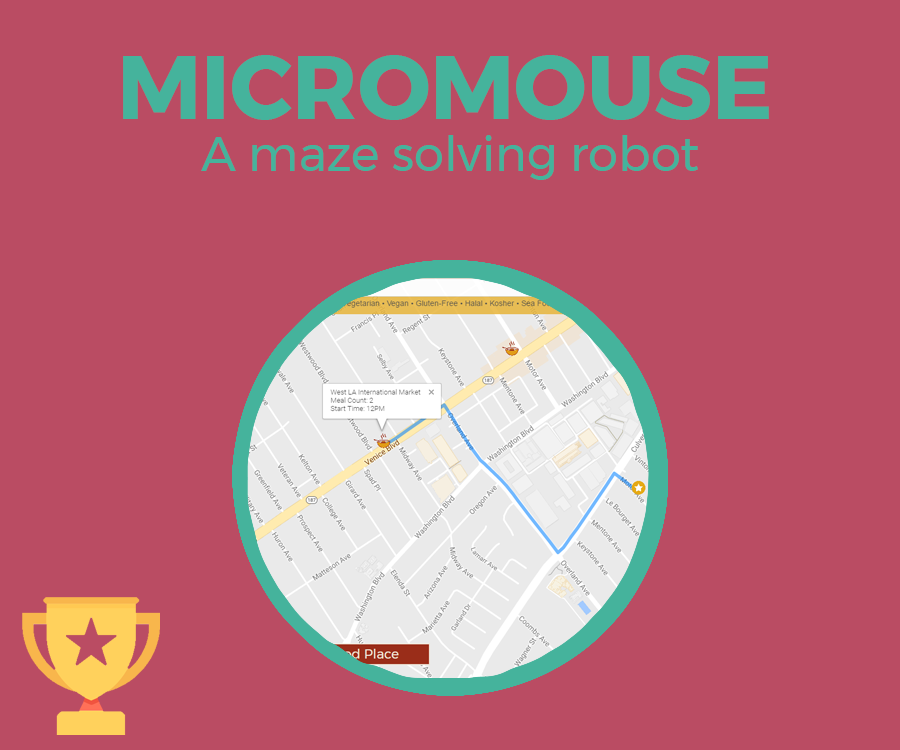
<style>
.page{position:relative;width:900px;height:750px;background:#ba4c63}
.page>*{position:absolute;margin:0}
.t1{font:90px "Montserrat-Bold";color:#45b39c}
.t2{font:48px "Montserrat-Regular";color:#45b39c}
</style>
<div class="page">
<p class="t1" style="left:123px;top:55px;width:646px;height:65px">MICROMOUSE</p>
<p class="t2" style="left:201px;top:135px;width:497px;height:45px">A maze solving robot</p>
</div>
